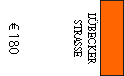
<style>
.page{position:relative;width:124px;height:76px;background:#ffffff}
.page>*{position:absolute;margin:0}
.t1{font:12px "AdobeDevanagari-Regular";color:#000000;scale:0.9 1}
.t2{font:14px "MyriadPro-Regular";color:#000000}
</style>
<div class="page">
<p class="t1" style="left:74px;top:13px;width:24px;height:51px;text-align:center;rotate:90deg">LÜBECKER<br>STRASSE</p>
<p class="t2" style="left:9px;top:23px;width:10px;height:31px;rotate:90deg">€ 180</p>
</div>
